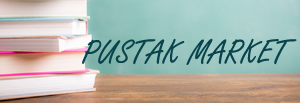
<style>
.page{position:relative;width:300px;height:103px}
.page>*{position:absolute;margin:0}
.t1{font:36px "FreestyleScript-Regular";color:#09434c}
</style>
<div class="page">
<p class="t1" style="left:82px;top:38px;width:215px;height:27px">PUSTAK MARKET</p>
</div>
